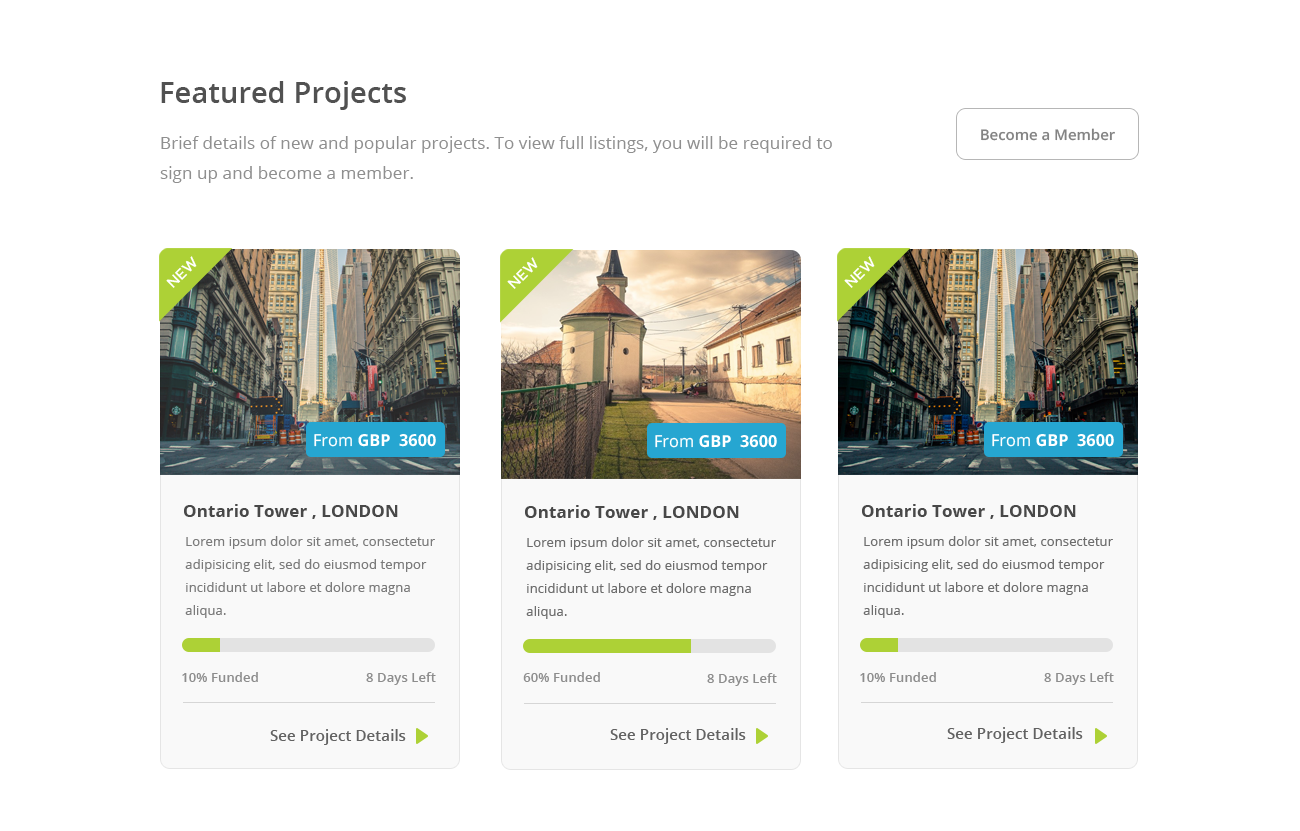
<style>
.page{position:relative;width:1300px;height:831px;background:#ffffff}
.page>*{position:absolute;margin:0}
.t1{font:29.2px "OpenSans-Semibold";color:#515151}
.t2{font:17.2px "OpenSans";color:#8f8f8f}
.t3{font:14.8px "OpenSans-Semibold";color:#838383}
.t4{font:14.6px "Montserrat-Regular";color:#ffffff}
.t5{font:16.5px "OpenSans-Bold";color:#ffffff}
.t6{font:16.5px "OpenSans";color:#ffffff}
.t7{font:17.2px "OpenSans-Bold";color:#484848}
.t8{font:13.2px "OpenSans";color:#7b7b7b}
.t9{font:13.2px "OpenSans";color:#6d6d6d}
.t10{font:13.2px "OpenSans-Semibold";color:#8d8d8d}
.t11{font:15.2px "OpenSans-Semibold";color:#626262}
</style>
<div class="page">
<p class="t1" style="left:161px;top:81px;width:245px;height:29px">Featured Projects</p>
<p class="t2" style="left:160px;top:136px;width:672px;height:47px">Brief details of new and popular projects. To view full listings, you will be required to<br>sign up and become a member.</p>
<p class="t3" style="left:981px;top:128px;width:134px;height:13px">Become a Member</p>
<p class="t4" style="left:166px;top:256px;width:31px;height:32px;rotate:-44deg">NEW</p>
<p class="t4" style="left:507px;top:257px;width:31px;height:32px;rotate:-44deg">NEW</p>
<p class="t4" style="left:844px;top:256px;width:31px;height:32px;rotate:-44deg">NEW</p>
<p class="t5" style="left:314px;top:434px;width:122px;height:13px"><span class="t6">From</span> GBP  3600</p>
<p class="t5" style="left:655px;top:435px;width:122px;height:13px"><span class="t6">From</span> GBP  3600</p>
<p class="t5" style="left:992px;top:434px;width:122px;height:13px"><span class="t6">From</span> GBP  3600</p>
<p class="t7" style="left:184px;top:504px;width:214px;height:15px">Ontario Tower , LONDON</p>
<p class="t7" style="left:525px;top:505px;width:214px;height:15px">Ontario Tower , LONDON</p>
<p class="t7" style="left:862px;top:504px;width:214px;height:15px">Ontario Tower , LONDON</p>
<p class="t8" style="left:185px;top:536px;width:250px;height:82px">Lorem ipsum dolor sit amet, consectetur adipisicing elit, sed do eiusmod tempor incididunt ut labore et dolore magna aliqua.</p>
<p class="t9" style="left:526px;top:537px;width:250px;height:82px">Lorem ipsum dolor sit amet, consectetur adipisicing elit, sed do eiusmod tempor incididunt ut labore et dolore magna aliqua.</p>
<p class="t9" style="left:863px;top:536px;width:250px;height:82px">Lorem ipsum dolor sit amet, consectetur adipisicing elit, sed do eiusmod tempor incididunt ut labore et dolore magna aliqua.</p>
<p class="t10" style="left:182px;top:672px;width:76px;height:10px">10% Funded</p>
<p class="t10" style="left:366px;top:672px;width:70px;height:13px">8 Days Left</p>
<p class="t10" style="left:523px;top:672px;width:77px;height:10px">60% Funded</p>
<p class="t10" style="left:707px;top:673px;width:70px;height:13px">8 Days Left</p>
<p class="t10" style="left:860px;top:672px;width:76px;height:10px">10% Funded</p>
<p class="t10" style="left:1044px;top:672px;width:70px;height:13px">8 Days Left</p>
<p class="t11" style="left:270px;top:729px;width:136px;height:16px">See Project Details</p>
<p class="t11" style="left:610px;top:728px;width:136px;height:16px">See Project Details</p>
<p class="t11" style="left:947px;top:727px;width:136px;height:16px">See Project Details</p>
</div>
